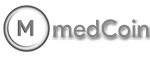
<style>
.page{position:relative;width:150px;height:57px;background:#ffffff}
.page>*{position:absolute;margin:0}
.t1{font:24px "ProductSans-Medium";color:#868686}
</style>
<div class="page">
<p class="t1" style="left:53px;top:19px;width:96px;height:19px">medCoin</p>
</div>
